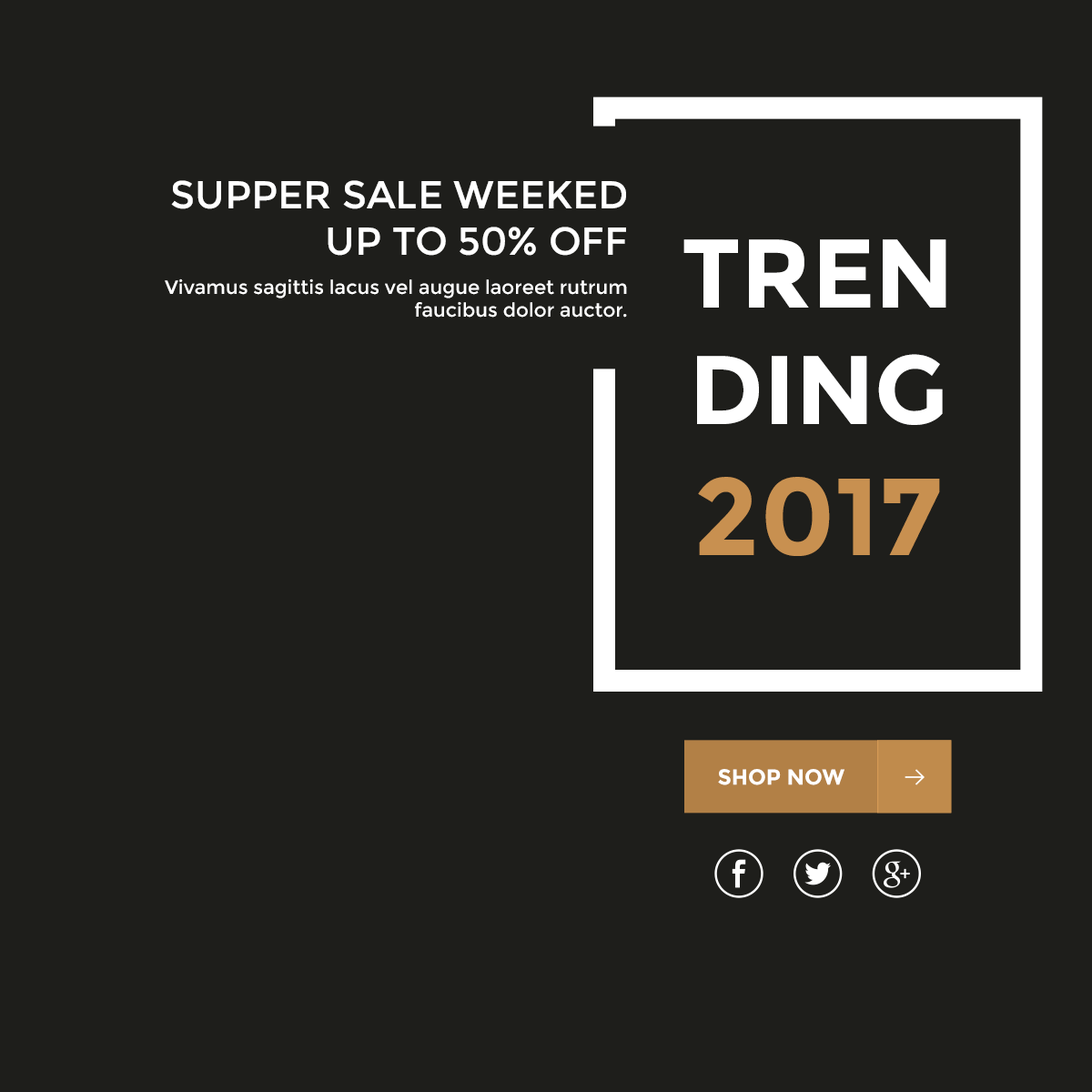
<style>
.page{position:relative;width:1092px;height:1092px;background:#1e1e1b}
.page>*{position:absolute;margin:0}
.t1{font:38.8px "Montserrat-Regular";color:#ffffff;text-transform:uppercase}
.t2{font:97.1px "Montserrat-Bold";color:#ffffff;text-transform:uppercase}
.t3{font:109.2px "Montserrat-Bold";color:#c89050;text-transform:uppercase}
.t4{font:19.4px "Montserrat-Regular";color:#ffffff}
.t5{font:21.8px "Montserrat-Bold";color:#ffffff;text-transform:uppercase}
</style>
<div class="page">
<p class="t1" style="left:171px;top:180px;width:455px;height:76px;text-align:right">supper sale weeked<br>up to 50% off</p>
<p class="t2" style="left:683px;top:239px;width:263px;height:317px;text-align:center">trending<br><span class="t3">2017</span></p>
<p class="t4" style="left:165px;top:278px;width:462px;height:40px;text-align:right">Vivamus sagittis lacus vel augue laoreet rutrum faucibus dolor auctor.</p>
<p class="t5" style="left:718px;top:769px;width:126px;height:16px">Shop now</p>
</div>
